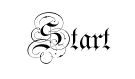
<style>
.page{position:relative;width:135px;height:79px;background:#ffffff}
.page>*{position:absolute;margin:0}
.t1{font:60px "Parchment-Regular";color:#020202}
</style>
<div class="page">
<p class="t1" style="left:27px;top:12px;width:84px;height:52px">Start</p>
</div>
